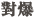
<style>
.page{position:relative;width:34px;height:18px;background:#ffffff}
.page>*{position:absolute;margin:0}
.t1{font:16px "RyuminPr6N-ExBold";color:#4c4743;font-weight:bold}
</style>
<div class="page">
<p class="t1" style="left:1px;top:1px;width:33px;height:16px">對爆</p>
</div>
